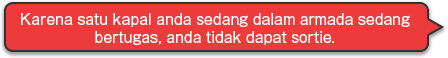
<style>
.page{position:relative;width:448px;height:58px;background:#ed3b3b}
.page>*{position:absolute;margin:0}
.t1{font:14px/18px "GothicMB101Pro-Regular";color:#ffffff}
</style>
<div class="page">
<p class="t1" style="left:21px;top:13px;width:389px;height:32px;text-align:center">Karena satu kapal anda sedang dalam armada sedang<br>bertugas, anda tidak dapat sortie.</p>
</div>
